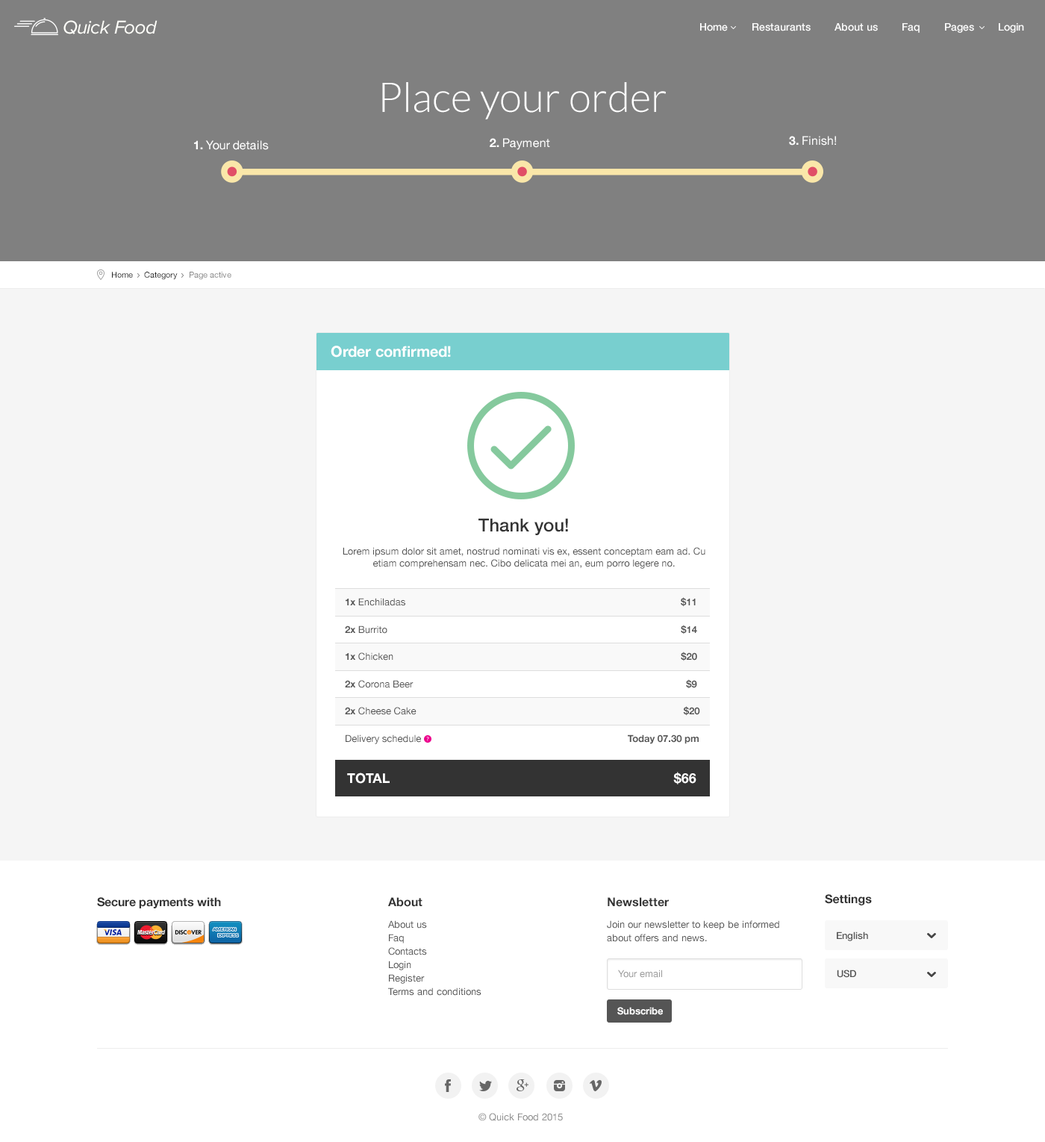
<style>
.page{position:relative;width:1045px;height:1142px;background:#ffffff}
.page>*{position:absolute;margin:0}
.t1{font:19.4px "ProximaNova-RegularIt";letter-spacing:-0.025em;color:#fefef9}
.t2{font:10.4px "HelveticaNeue-Medium";color:#ffffff}
.t3{font:41px "Lato-Light";color:#ffffff}
.t4{font:11.9px "HelveticaNeue";color:#ffffff}
.t5{font:11.9px "HelveticaNeue-Bold";color:#ffffff}
.t6{font:8.2px "HelveticaNeue";color:#252525}
.t7{font:8.2px "HelveticaNeue";color:#888888}
.t8{font:14.9px "HelveticaNeue-Bold";color:#ffffff}
.t9{font:9.7px "HelveticaNeue";color:#555555}
.t10{font:17.9px "HelveticaNeue-Medium";color:#333333}
.t11{font:9.7px "HelveticaNeue-Bold";color:#555555}
.t12{font:13.4px "HelveticaNeue-Bold";color:#ffffff}
.t13{font:11.9px "HelveticaNeue-Bold";color:#333333}
.t14{font:9.7px/13.4px "HelveticaNeue";color:#555555}
.t15{font:9.7px "HelveticaNeue-Medium";color:#555555}
.t16{font:9.7px "HelveticaNeue";color:#999999}
.t17{font:9.7px "HelveticaNeue-Bold";color:#ffffff}
.t18{font:9.7px "HelveticaNeue";color:#8c8c8c}
</style>
<div class="page">
<p class="t1" style="left:63px;top:20px;width:94px;height:14px">Quick Food</p>
<p class="t2" style="left:700px;top:23px;width:324px;height:10px">Home        Restaurants        About us        Faq        Pages        Login</p>
<p class="t3" style="left:382px;top:82px;width:284px;height:37px">Place your order</p>
<p class="t4" style="left:789px;top:136px;width:47px;height:9px"><span class="t5">3.</span> Finish!</p>
<p class="t4" style="left:194px;top:140px;width:75px;height:10px"><span class="t5">1.</span> Your details</p>
<p class="t4" style="left:489px;top:138px;width:61px;height:12px"><span class="t5">2.</span> Payment</p>
<p class="t6" style="left:112px;top:272px;width:119px;height:8px">Home     Category     <span class="t7">Page active</span></p>
<p class="t8" style="left:331px;top:345px;width:120px;height:12px">Order confirmed!</p>
<p class="t9" style="left:342px;top:518px;width:363px;height:51px;text-align:center"><span class="t10">Thank you!<br><br></span>Lorem ipsum dolor sit amet, nostrud nominati vis ex, essent conceptam eam ad. Cu etiam comprehensam nec. Cibo delicata mei an, eum porro legere no.</p>
<p class="t9" style="left:345px;top:597px;width:350px;height:10px"><span class="t11">1x</span> Enchiladas                <span class="t11">$11</span></p>
<p class="t9" style="left:345px;top:625px;width:352px;height:9px"><span class="t11">2x</span> Burrito                         <span class="t11">$14</span></p>
<p class="t9" style="left:345px;top:651px;width:352px;height:10px"><span class="t11">1x</span> Chicken                         <span class="t11">$20</span></p>
<p class="t9" style="left:345px;top:679px;width:352px;height:10px"><span class="t11">2x</span> Corona Beer                 <span class="t11">$9</span></p>
<p class="t9" style="left:345px;top:706px;width:355px;height:10px"><span class="t11">2x</span> Cheese Cake                <span class="t11">$20</span></p>
<p class="t9" style="left:345px;top:734px;width:353px;height:10px">Delivery schedule                                                 <span class="t11">Today 07.30 pm</span></p>
<p class="t12" style="left:347px;top:771px;width:349px;height:13px">TOTAL                                                                            $66</p>
<p class="t13" style="left:824px;top:894px;width:47px;height:11px">Settings</p>
<p class="t13" style="left:97px;top:897px;width:124px;height:11px">Secure payments with</p>
<p class="t13" style="left:388px;top:897px;width:34px;height:10px">About</p>
<p class="t13" style="left:607px;top:897px;width:62px;height:10px">Newsletter</p>
<p class="t14" style="left:388px;top:920px;width:93px;height:75px">About us<br>Faq<br>Contacts<br>Login<br>Register<br>Terms and conditions</p>
<p class="t14" style="left:607px;top:920px;width:172px;height:22px">Join our newsletter to keep be informed about offers and news.</p>
<p class="t15" style="left:836px;top:931px;width:32px;height:10px">English</p>
<p class="t16" style="left:618px;top:969px;width:44px;height:8px">Your email</p>
<p class="t15" style="left:836px;top:969px;width:20px;height:8px">USD</p>
<p class="t17" style="left:617px;top:1007px;width:46px;height:8px">Subscribe</p>
<p class="t18" style="left:478px;top:1112px;width:85px;height:9px">© Quick Food 2015</p>
</div>
